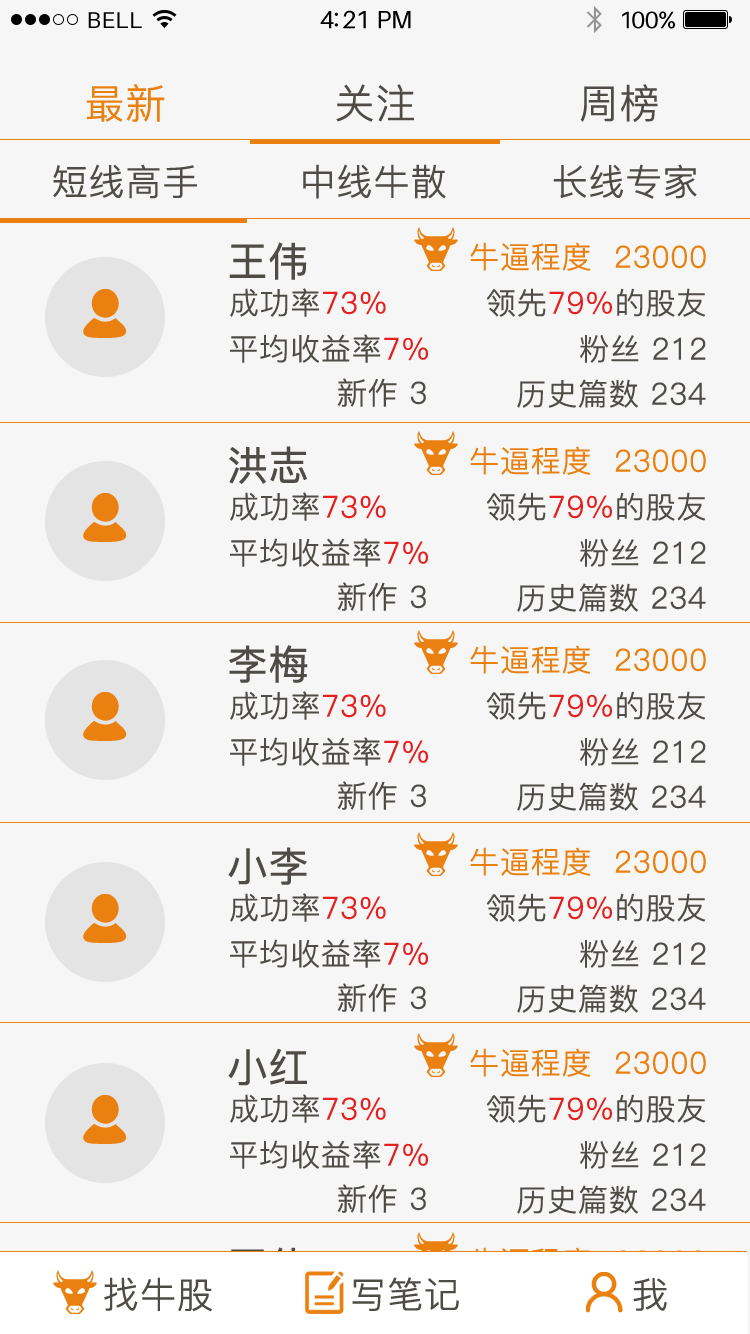
<style>
.page{position:relative;width:750px;height:1334px;background:#f6f6f6}
.page>*{position:absolute;margin:0}
.t1{font:23px "Aileron-Regular";letter-spacing:0.02em;color:#000000}
.t2{font:25px "Aileron-Regular";letter-spacing:-0.02em;color:#000000}
.t3{font:24px "Aileron-Regular";letter-spacing:-0.02em;color:#000000}
.t4{font:40px "PingFang-SC-Regular";color:#ea8010;font-weight:bold}
.t5{font:40px "PingFang-SC-Regular";color:#4f4c47;font-weight:bold}
.t6{font:36px "PingFang-SC-Regular";color:#4f4c47;font-weight:bold}
.t7{font:40px "PingFang-SC-Medium";color:#4f4c47;font-weight:bold}
.t8{font:30px "PingFang-SC-Regular";color:#ea8010;font-weight:bold}
.t9{font:30px "PingFang-SC-Regular";color:#4f4c47;font-weight:bold}
.t10{font:30px "PingFang-SC-Regular";color:#e42020;font-weight:bold}
</style>
<div class="page">
<p class="t1" style="left:88px;top:12px;width:54px;height:16px">BELL</p>
<p class="t2" style="left:320px;top:10px;width:91px;height:19px">4:21 PM</p>
<p class="t3" style="left:622px;top:11px;width:53px;height:18px">100%</p>
<p class="t4" style="left:86px;top:84px;width:79px;height:38px">最新</p>
<p class="t5" style="left:336px;top:84px;width:78px;height:38px">关注</p>
<p class="t5" style="left:580px;top:84px;width:78px;height:38px">周榜</p>
<p class="t6" style="left:53px;top:164px;width:144px;height:35px">短线高手</p>
<p class="t6" style="left:303px;top:164px;width:143px;height:35px">中线牛散</p>
<p class="t6" style="left:553px;top:164px;width:144px;height:35px">长线专家</p>
<p class="t7" style="left:229px;top:242px;width:78px;height:38px">王伟</p>
<p class="t8" style="left:470px;top:242px;width:236px;height:29px">牛逼程度  23000</p>
<p class="t9" style="left:230px;top:288px;width:156px;height:29px">成功率<span class="t10">73%</span></p>
<p class="t10" style="left:486px;top:288px;width:220px;height:29px"><span class="t9">领先</span>79%<span class="t9">的股友</span></p>
<p class="t9" style="left:230px;top:334px;width:198px;height:29px">平均收益率<span class="t10">7%</span></p>
<p class="t9" style="left:580px;top:334px;width:126px;height:29px">粉丝 212</p>
<p class="t9" style="left:337px;top:378px;width:89px;height:29px">新作 3</p>
<p class="t9" style="left:517px;top:379px;width:189px;height:29px">历史篇数 234</p>
<p class="t7" style="left:229px;top:446px;width:78px;height:38px">洪志</p>
<p class="t8" style="left:470px;top:446px;width:236px;height:29px">牛逼程度  23000</p>
<p class="t9" style="left:230px;top:492px;width:156px;height:29px">成功率<span class="t10">73%</span></p>
<p class="t10" style="left:486px;top:492px;width:220px;height:29px"><span class="t9">领先</span>79%<span class="t9">的股友</span></p>
<p class="t9" style="left:230px;top:538px;width:198px;height:29px">平均收益率<span class="t10">7%</span></p>
<p class="t9" style="left:580px;top:538px;width:126px;height:29px">粉丝 212</p>
<p class="t9" style="left:337px;top:582px;width:89px;height:29px">新作 3</p>
<p class="t9" style="left:517px;top:583px;width:189px;height:29px">历史篇数 234</p>
<p class="t7" style="left:229px;top:645px;width:79px;height:38px">李梅</p>
<p class="t8" style="left:470px;top:645px;width:236px;height:29px">牛逼程度  23000</p>
<p class="t9" style="left:230px;top:691px;width:156px;height:29px">成功率<span class="t10">73%</span></p>
<p class="t10" style="left:486px;top:691px;width:220px;height:29px"><span class="t9">领先</span>79%<span class="t9">的股友</span></p>
<p class="t9" style="left:230px;top:737px;width:198px;height:29px">平均收益率<span class="t10">7%</span></p>
<p class="t9" style="left:580px;top:737px;width:126px;height:29px">粉丝 212</p>
<p class="t9" style="left:337px;top:781px;width:89px;height:29px">新作 3</p>
<p class="t9" style="left:517px;top:782px;width:189px;height:29px">历史篇数 234</p>
<p class="t7" style="left:228px;top:847px;width:79px;height:38px">小李</p>
<p class="t8" style="left:470px;top:847px;width:236px;height:29px">牛逼程度  23000</p>
<p class="t9" style="left:230px;top:893px;width:156px;height:29px">成功率<span class="t10">73%</span></p>
<p class="t10" style="left:486px;top:893px;width:220px;height:29px"><span class="t9">领先</span>79%<span class="t9">的股友</span></p>
<p class="t9" style="left:230px;top:939px;width:198px;height:29px">平均收益率<span class="t10">7%</span></p>
<p class="t9" style="left:580px;top:939px;width:126px;height:29px">粉丝 212</p>
<p class="t9" style="left:337px;top:983px;width:89px;height:29px">新作 3</p>
<p class="t9" style="left:517px;top:984px;width:189px;height:29px">历史篇数 234</p>
<p class="t7" style="left:228px;top:1048px;width:79px;height:38px">小红</p>
<p class="t8" style="left:470px;top:1048px;width:236px;height:29px">牛逼程度  23000</p>
<p class="t9" style="left:230px;top:1094px;width:156px;height:29px">成功率<span class="t10">73%</span></p>
<p class="t10" style="left:486px;top:1094px;width:220px;height:29px"><span class="t9">领先</span>79%<span class="t9">的股友</span></p>
<p class="t9" style="left:230px;top:1140px;width:198px;height:29px">平均收益率<span class="t10">7%</span></p>
<p class="t9" style="left:580px;top:1140px;width:126px;height:29px">粉丝 212</p>
<p class="t9" style="left:337px;top:1184px;width:89px;height:29px">新作 3</p>
<p class="t9" style="left:517px;top:1185px;width:189px;height:29px">历史篇数 234</p>
<p class="t6" style="left:104px;top:1277px;width:108px;height:35px">找牛股</p>
<p class="t6" style="left:352px;top:1277px;width:107px;height:34px">写笔记</p>
<p class="t6" style="left:633px;top:1278px;width:34px;height:33px">我</p>
</div>
